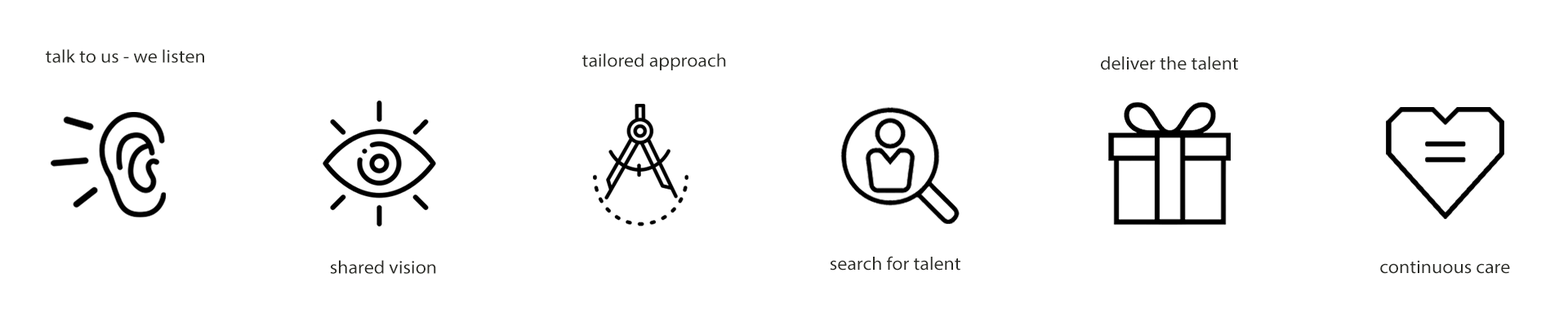
<style>
.page{position:relative;width:1568px;height:327px;background:#ffffff}
.page>*{position:absolute;margin:0}
.t1{font:18.4px "MyriadPro-Regular";color:#2b2c27;scale:1.06 1}
</style>
<div class="page">
<p class="t1" style="left:46px;top:49px;width:158px;height:14px">talk to us - we listen</p>
<p class="t1" style="left:582px;top:53px;width:144px;height:17px">tailored approach</p>
<p class="t1" style="left:1101px;top:56px;width:137px;height:14px">deliver the talent</p>
<p class="t1" style="left:830px;top:256px;width:130px;height:14px">search for talent</p>
<p class="t1" style="left:330px;top:260px;width:106px;height:14px">shared vision</p>
<p class="t1" style="left:1380px;top:260px;width:130px;height:14px">continuous care</p>
</div>
